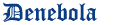
<style>
.page{position:relative;width:135px;height:25px;background:#ffffff}
.page>*{position:absolute;margin:0}
.t1{font:25px "OldEnglishTextMT";color:#0a3c82}
</style>
<div class="page">
<p class="t1" style="left:3px;top:2px;width:94px;height:20px">Denebola</p>
</div>
